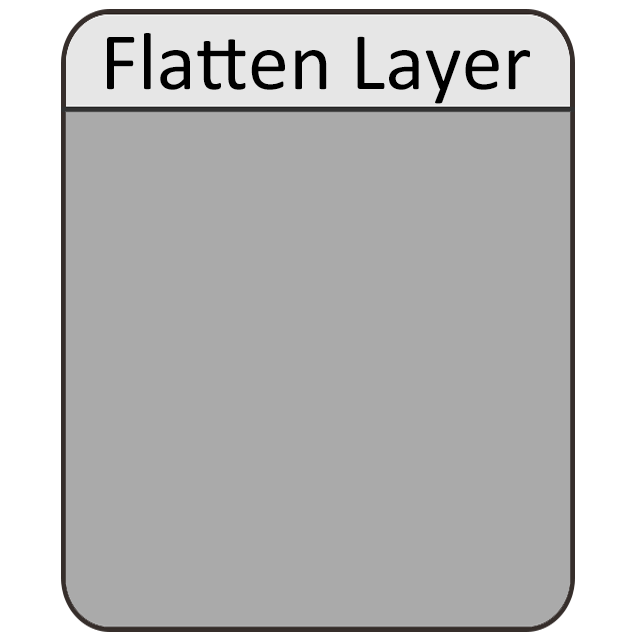
<style>
.page{position:relative;width:640px;height:640px;background:#aaaaaa}
.page>*{position:absolute;margin:0}
.t1{font:82.2px "Calibri";color:#000000}
</style>
<div class="page">
<p class="t1" style="left:107px;top:33px;width:423px;height:71px">Flatten Layer</p>
</div>
